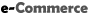
<style>
.page{position:relative;width:88px;height:16px;background:#ffffff}
.page>*{position:absolute;margin:0}
.t1{font:15.3px "BerlinSansFBDemi-Bold";color:#545454}
.t2{font:15.3px "BerlinSansFBDemi-Bold";color:#000000}
</style>
<div class="page">
<p class="t1" style="left:1px;top:2px;width:87px;height:11px"><span class="t2">e-</span>Commerce</p>
</div>
